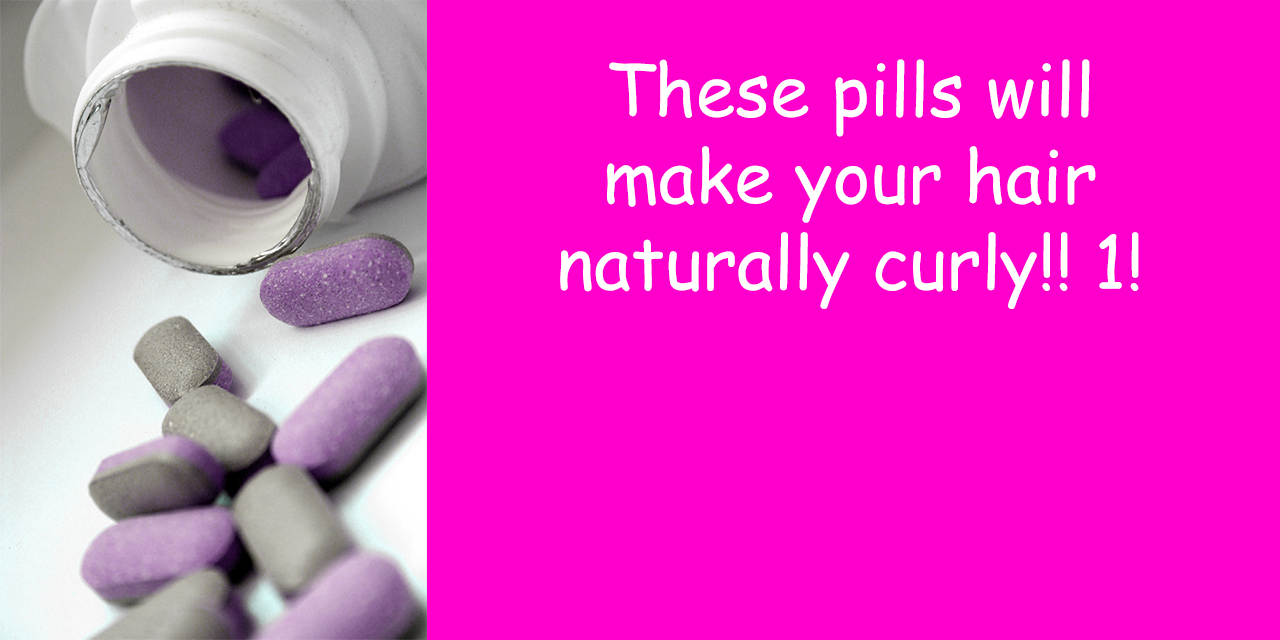
<style>
.page{position:relative;width:1280px;height:640px;background:#ff00cc}
.page>*{position:absolute;margin:0}
.t1{font:72px "ComicSansMS";color:#ffffff}
</style>
<div class="page">
<p class="t1" style="left:560px;top:59px;width:579px;height:250px;text-align:center">These pills will<br>make your hair<br>naturally curly!! 1!</p>
</div>
